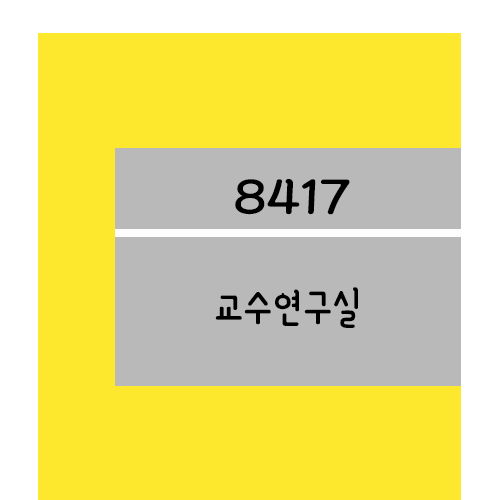
<style>
.page{position:relative;width:500px;height:500px;background:#fee82d}
.page>*{position:absolute;margin:0}
.t1{font:61.2px "YanoljaYacheR";color:#000000;scale:1.18 1}
.t2{font:48px "YanoljaYacheR";color:#000000}
</style>
<div class="page">
<p class="t1" style="left:235px;top:179px;width:115px;height:36px">8417</p>
<p class="t2" style="left:215px;top:287px;width:143px;height:41px">교수연구실</p>
</div>
